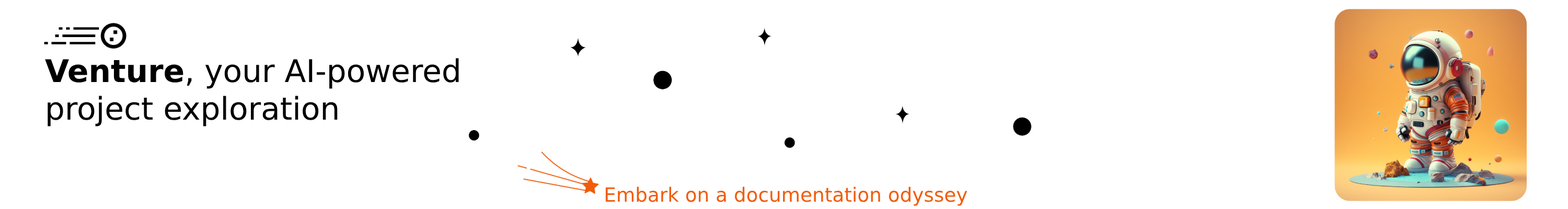
<style>
.page{position:relative;width:1568px;height:209px;background:#ffffff}
.page>*{position:absolute;margin:0}
.t1{font:31.2px "DejaVuSans";color:#000000}
.t2{font:31.2px "DejaVuSans-Bold";color:#000000}
.t3{font:19.5px "DejaVuSans";color:#f15c0b}
</style>
<div class="page">
<p class="t1" style="left:45px;top:58px;width:414px;height:68px"><span class="t2">Venture</span>, your AI-powered <br>project exploration</p>
<p class="t3" style="left:605px;top:187px;width:362px;height:19px">Embark on a documentation odyssey</p>
</div>
